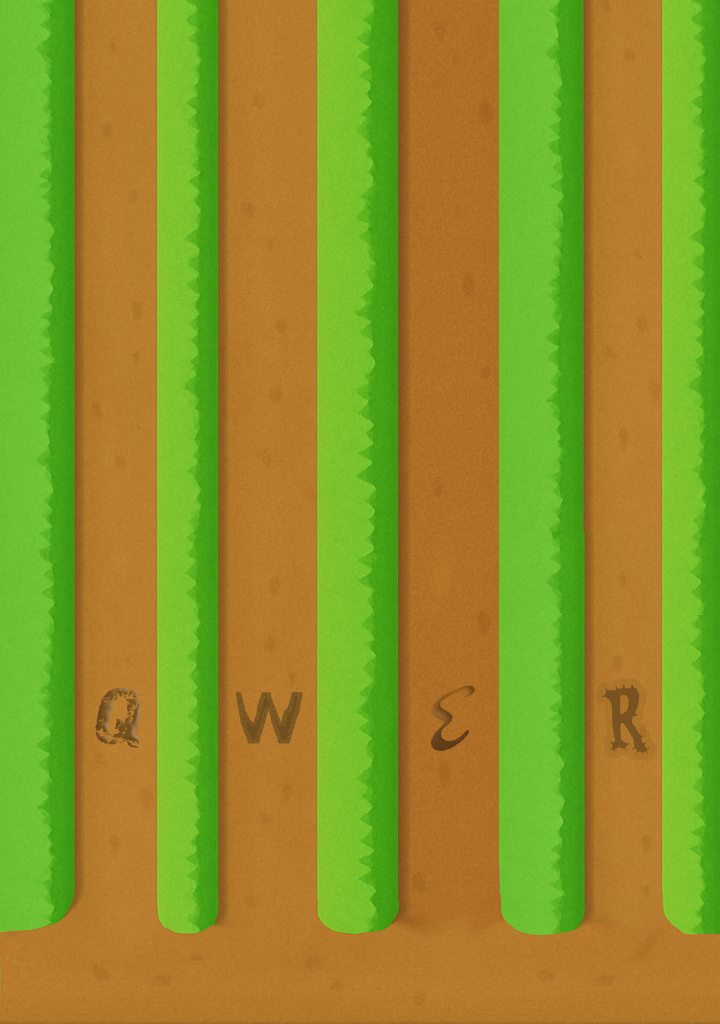
<style>
.page{position:relative;width:720px;height:1024px}
.page>*{position:absolute;margin:0}
.t1{font:60px "Destroy";color:#7a5321;font-style:italic}
.t2{font:77px "DrSugiyama-Regular"}
.t3{font:77px "Eater-Regular";color:#795321}
.t4{font:146.4px "Dokdo-Regular";color:#7a5722;scale:0.71 1}
</style>
<div class="page">
<p class="t1" style="left:95px;top:687px;width:46px;height:61px">Q</p>
<p class="t2" style="left:431px;top:685px;width:44px;height:67px">E</p>
<p class="t3" style="left:601px;top:684px;width:50px;height:72px">R</p>
<p class="t4" style="left:235px;top:691px;width:68px;height:53px">W</p>
</div>
